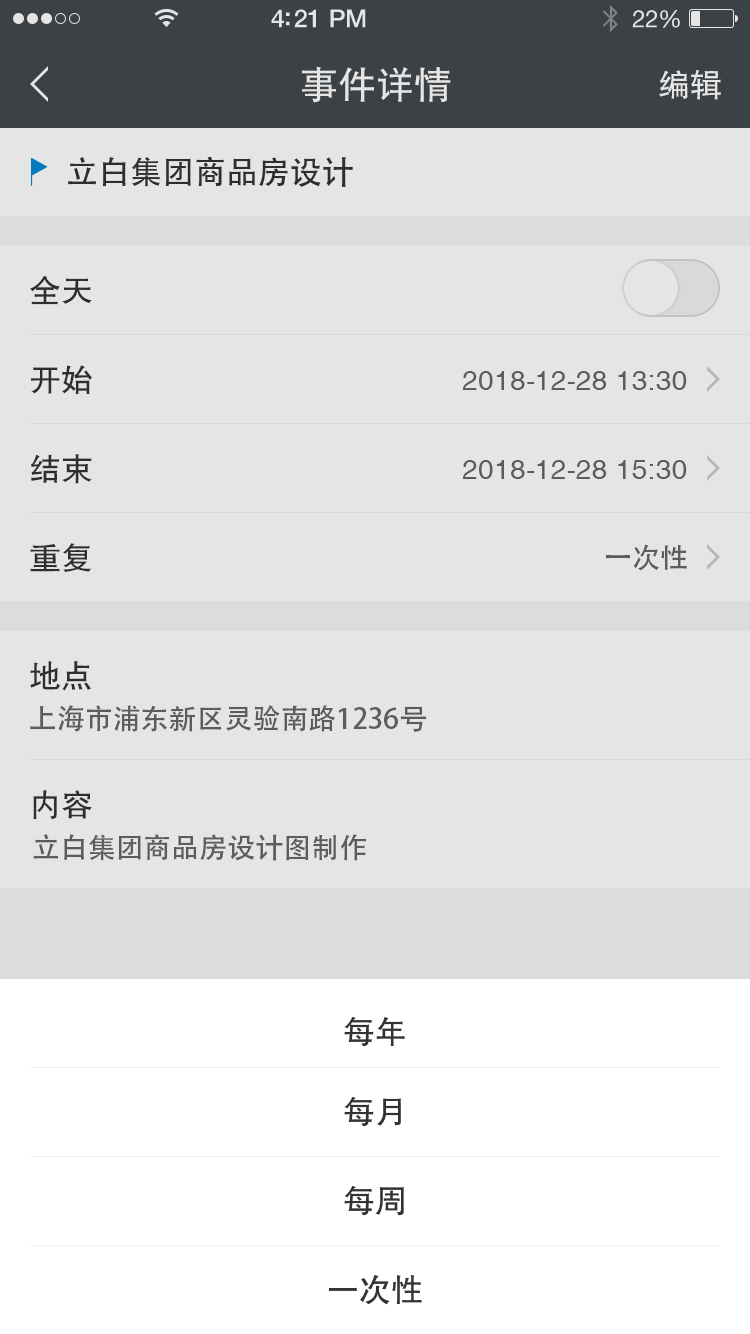
<style>
.page{position:relative;width:750px;height:1334px;background:#e5e5e5}
.page>*{position:absolute;margin:0}
.t1{font:38px "FZHTJW--GB1-0";color:#e5e5e5}
.t2{font:32px "FZHTJW--GB1-0";color:#e5e5e5}
.t3{font:32px "AdobeHeitiStd-Regular";color:#333333}
.t4{font:32px "FZHTJW--GB1-0";color:#333333}
.t5{font:32.1px "FZHTJW--GB1-0";color:#333333}
.t6{font:28px "Helvetica";color:#666666}
.t7{font:28px "AdobeHeitiStd-Regular";color:#666666}
</style>
<div class="page">
<p class="t1" style="left:302px;top:67px;width:149px;height:36px">事件详情</p>
<p class="t2" style="left:659px;top:70px;width:62px;height:30px">编辑</p>
<p class="t3" style="left:68px;top:156px;width:285px;height:31px">立白集团商品房设计</p>
<p class="t4" style="left:30px;top:276px;width:62px;height:29px">全天</p>
<p class="t5" style="left:31px;top:365px;width:61px;height:29px">开始</p>
<p class="t6" style="left:462px;top:371px;width:225px;height:19px">2018-12-28 13:30</p>
<p class="t5" style="left:31px;top:454px;width:61px;height:30px">结束</p>
<p class="t6" style="left:462px;top:460px;width:225px;height:19px">2018-12-28 15:30</p>
<p class="t5" style="left:30px;top:543px;width:62px;height:29px">重复</p>
<p class="t7" style="left:605px;top:544px;width:82px;height:27px">一次性</p>
<p class="t5" style="left:30px;top:661px;width:61px;height:30px">地点</p>
<p class="t7" style="left:30px;top:705px;width:397px;height:27px">上海市浦东新区灵验南路1236号</p>
<p class="t5" style="left:33px;top:790px;width:59px;height:29px">内容</p>
<p class="t7" style="left:33px;top:834px;width:333px;height:27px">立白集团商品房设计图制作</p>
<p class="t4" style="left:344px;top:1017px;width:61px;height:30px">每年</p>
<p class="t4" style="left:344px;top:1097px;width:57px;height:30px">每月</p>
<p class="t4" style="left:344px;top:1186px;width:60px;height:30px">每周</p>
<p class="t4" style="left:329px;top:1275px;width:93px;height:30px">一次性</p>
</div>
